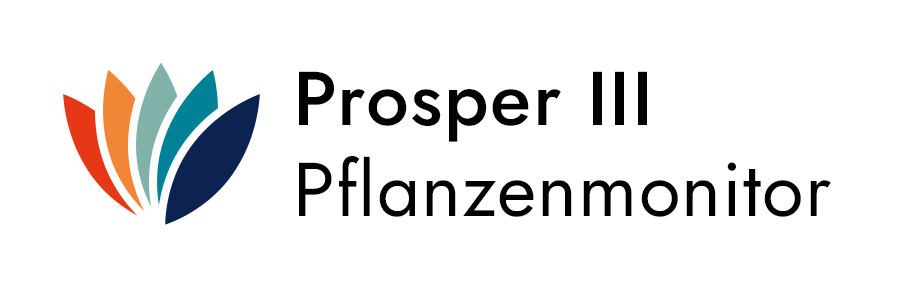
<style>
.page{position:relative;width:900px;height:290px;background:#ffffff}
.page>*{position:absolute;margin:0}
.t1{font:76px "Jost-Medium";letter-spacing:0.02em;color:#000000}
.t2{font:76px "Jost-Book";letter-spacing:0.014em;color:#000000}
</style>
<div class="page">
<p class="t1" style="left:299px;top:71px;width:348px;height:71px">Prosper III</p>
<p class="t2" style="left:299px;top:156px;width:532px;height:61px">Pflanzenmonitor</p>
</div>
